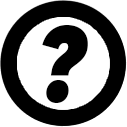
<style>
.page{position:relative;width:127px;height:127px;background:#ffffff}
.page>*{position:absolute;margin:0}
.t1{font:105px "AvenirNextCondensed-HeavyItalic";color:#000000}
</style>
<div class="page">
<p class="t1" style="left:42px;top:25px;width:46px;height:78px">?</p>
</div>
